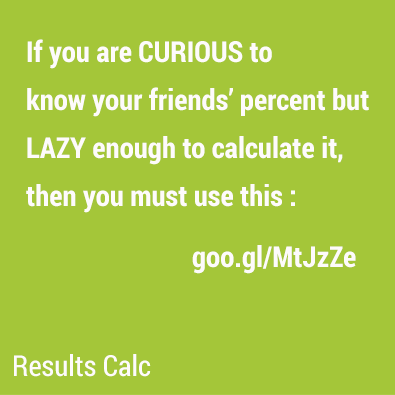
<style>
.page{position:relative;width:395px;height:395px;background:#a4c639}
.page>*{position:absolute;margin:0}
.t1{font:29px/16px "RobotoCondensed-Bold";color:#fefbfb}
.t2{font:29px "RobotoCondensed-Bold";color:#fefbfb}
.t3{font:29px "RobotoCondensed-Regular";color:#fefbfb}
</style>
<div class="page">
<p class="t1" style="left:26px;top:39px;width:343px;height:174px">If you are CURIOUS to <br><br><br>know your friends’ percent but<br><br><br>LAZY enough to calculate it,<br><br><br>then you must use this :</p>
<p class="t2" style="left:192px;top:245px;width:164px;height:29px">goo.gl/MtJzZe</p>
<p class="t3" style="left:14px;top:354px;width:137px;height:23px">Results Calc</p>
</div>
